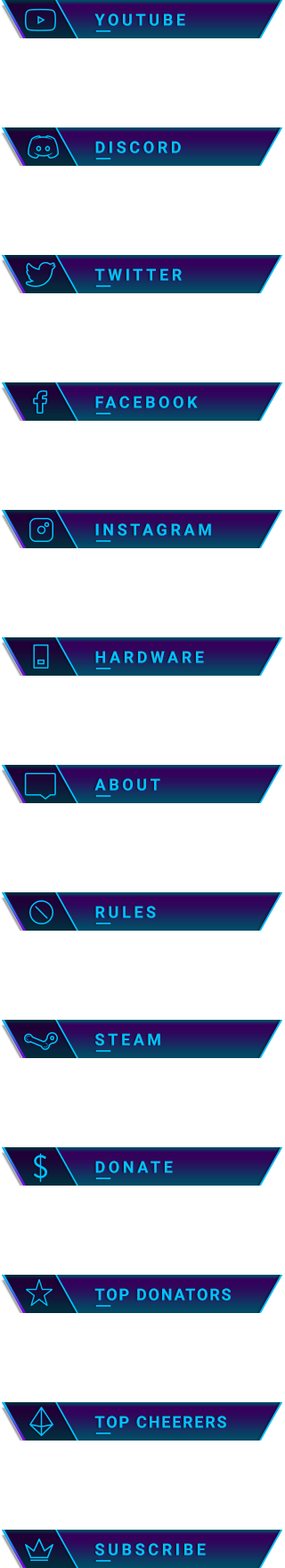
<style>
.page{position:relative;width:285px;height:1568px;background:#ffffff}
.page>*{position:absolute;margin:0}
.t1{font:16px "Roboto-Bold";letter-spacing:0.2em;color:#00c2ff;text-transform:uppercase}
.t2{font:16px "Roboto-Bold";letter-spacing:0.1em;color:#00c2ff;text-transform:uppercase}
</style>
<div class="page">
<p class="t1" style="left:94px;top:13px;width:91px;height:13px">Youtube</p>
<p class="t1" style="left:95px;top:141px;width:86px;height:12px">Discord</p>
<p class="t1" style="left:94px;top:268px;width:88px;height:13px">Twitter</p>
<p class="t1" style="left:95px;top:396px;width:103px;height:12px">Facebook</p>
<p class="t1" style="left:95px;top:523px;width:116px;height:13px">Instagram</p>
<p class="t1" style="left:95px;top:651px;width:109px;height:12px">Hardware</p>
<p class="t1" style="left:94px;top:778px;width:66px;height:13px">About</p>
<p class="t1" style="left:95px;top:906px;width:61px;height:12px">Rules</p>
<p class="t1" style="left:95px;top:1033px;width:65px;height:13px">Steam</p>
<p class="t1" style="left:95px;top:1161px;width:78px;height:12px">donate</p>
<p class="t2" style="left:94px;top:1288px;width:137px;height:13px">Top Donators</p>
<p class="t2" style="left:94px;top:1416px;width:132px;height:12px">Top Cheerers</p>
<p class="t1" style="left:95px;top:1543px;width:111px;height:13px">Subscribe</p>
</div>
